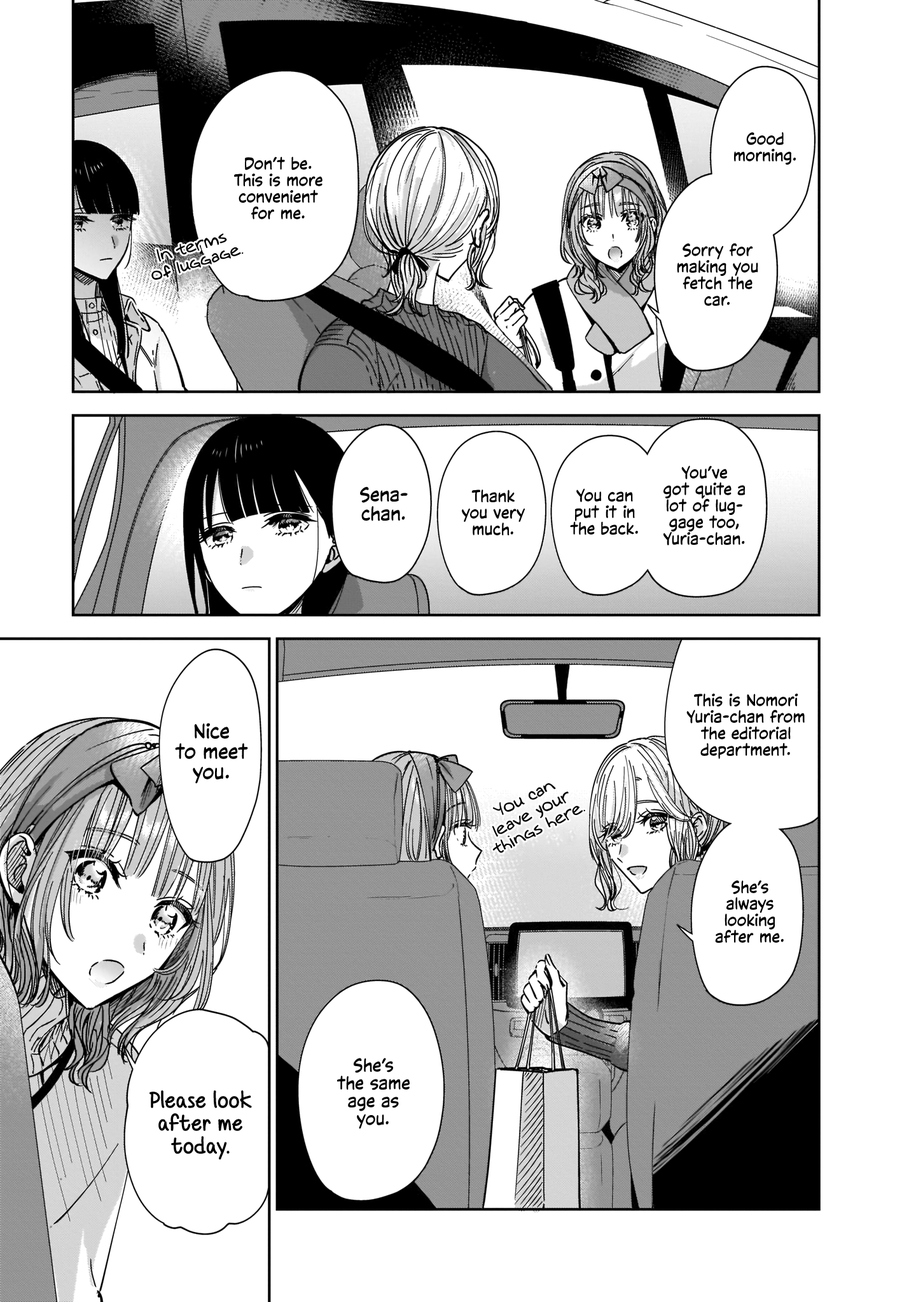
<style>
.page{position:relative;width:916px;height:1302px;background:#ffffff}
.page>*{position:absolute;margin:0}
.t1{font:16.5px "CCVictorySpeechLower-Regular";color:#000000}
.t2{font:16.5px "Augie";color:#000000}
.t3{font:19.1px "CCVictorySpeechLower-Regular";color:#000000}
.t4{font:20.3px "CCVictorySpeechLower-Regular";color:#000000}
.t5{font:17.8px "CCVictorySpeechLower-Regular";color:#000000}
.t6{font:22.9px "BordersDivideButHeartsShall";color:#000000;font-weight:bold}
</style>
<div class="page">
<p class="t1" style="left:734px;top:132px;width:61px;height:33px;text-align:center">Good<br>morning.</p>
<p class="t1" style="left:234px;top:156px;width:88px;height:63px;text-align:center">Don’t be.<br>This is more<br>convenient<br>for me.</p>
<p class="t2" style="left:151px;top:233px;width:93px;height:47px;text-align:center;rotate:-17deg">In terms<br>of luggage.</p>
<p class="t1" style="left:677px;top:243px;width:81px;height:63px;text-align:center">Sorry for<br>making you<br>fetch the<br>car.</p>
<p class="t1" style="left:663px;top:465px;width:82px;height:81px;text-align:center">You’ve<br>got quite a<br>lot of lug-<br>gage too,<br>Yuria-chan.</p>
<p class="t3" style="left:360px;top:486px;width:48px;height:35px;text-align:center">Sena-<br>chan.</p>
<p class="t1" style="left:462px;top:490px;width:63px;height:45px;text-align:center">Thank<br>you very<br>much.</p>
<p class="t1" style="left:570px;top:488px;width:68px;height:47px;text-align:center">You can<br>put it in<br>the back.</p>
<p class="t1" style="left:686px;top:694px;width:118px;height:65px;text-align:center">This is Nomori<br>Yuria-chan from<br>the editorial<br>department.</p>
<p class="t4" style="left:175px;top:723px;width:73px;height:61px;text-align:center">Nice<br>to meet<br>you.</p>
<p class="t2" style="left:492px;top:783px;width:93px;height:70px;text-align:center;rotate:-26deg">You can<br>leave your<br>things here.</p>
<p class="t1" style="left:715px;top:880px;width:68px;height:63px;text-align:center">She’s<br>always<br>looking<br>after me.</p>
<p class="t5" style="left:337px;top:1058px;width:73px;height:71px;text-align:center">She’s<br>the same<br>age as<br>you.</p>
<p class="t6" style="left:149px;top:1091px;width:103px;height:69px;text-align:center">Please look<br>after me<br>today.</p>
</div>
